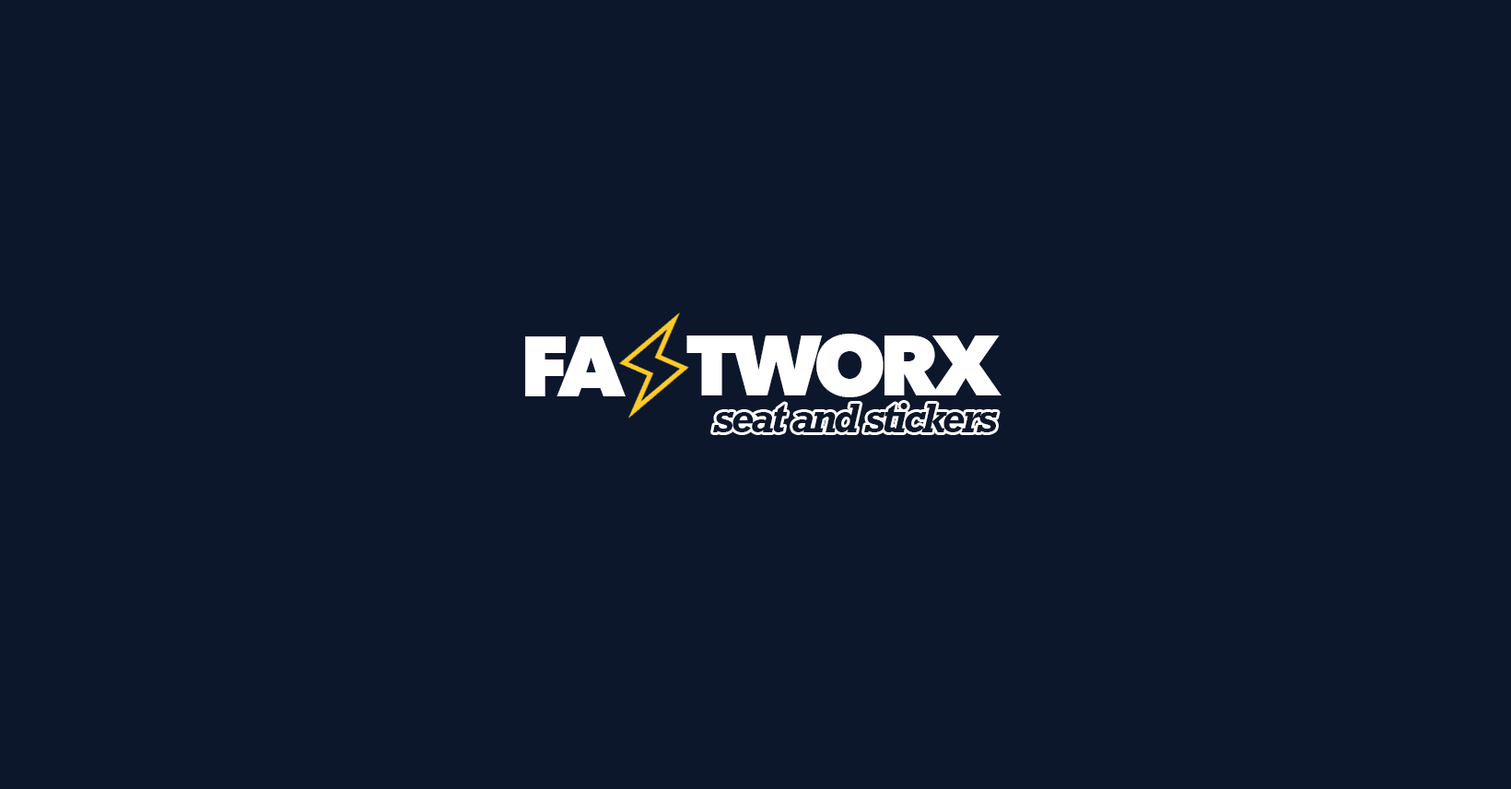
<style>
.page{position:relative;width:1511px;height:789px;background:#0c172c}
.page>*{position:absolute;margin:0}
.t1{font:84.5px "AvenirNext-Heavy";letter-spacing:-0.075em;color:#ffffff}
.t2{font:84.5px "AvenirNext-Heavy";letter-spacing:-0.08em;color:#ffffff}
.t3{font:38.4px "Rockwell-BoldItalic";letter-spacing:-0.075em;color:#0c172c}
</style>
<div class="page">
<p class="t1" style="left:525px;top:336px;width:101px;height:60px">FA</p>
<p class="t2" style="left:687px;top:334px;width:315px;height:63px">TWORX</p>
<p class="t3" style="left:713px;top:403px;width:285px;height:29px">seat and stickers</p>
</div>
